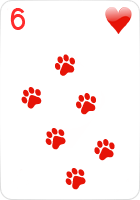
<style>
.page{position:relative;width:140px;height:200px;background:#ffffff}
.page>*{position:absolute;margin:0}
.t1{font:26px "CardCharacters";color:#ff2b2b}
</style>
<div class="page">
<p class="t1" style="left:10px;top:8px;width:15px;height:22px">6</p>
</div>
